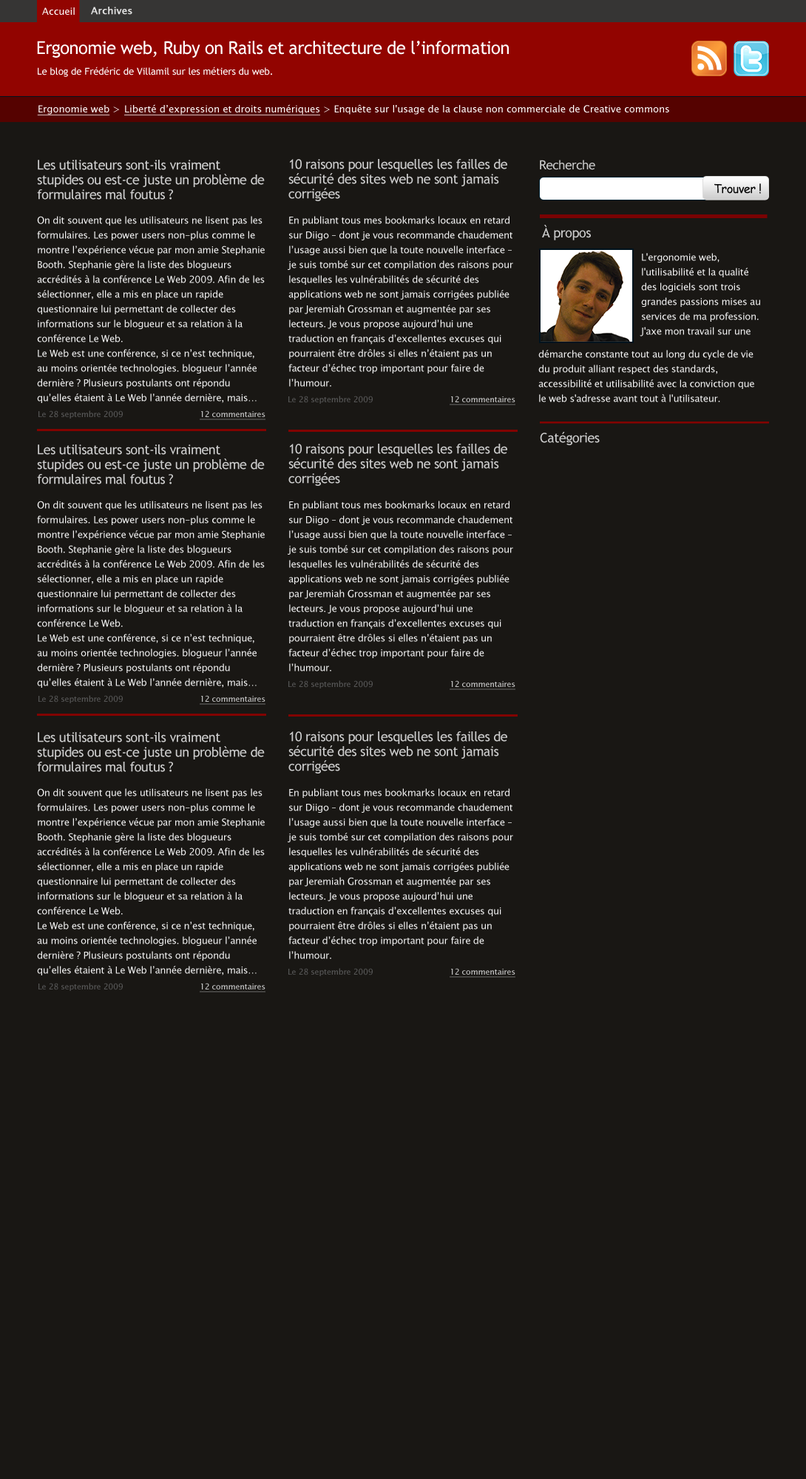
<style>
.page{position:relative;width:806px;height:1479px;background:#191714}
.page>*{position:absolute;margin:0}
.t1{font:9.6px "LucidaSansUnicode";color:#ffffff}
.t2{font:9.6px "LucidaSansUnicode";color:#e1e1e1;font-weight:bold}
.t3{font:17.8px "TrebuchetMS";letter-spacing:-0.025em;color:#ffffff}
.t4{font:9.6px "TrebuchetMS";color:#ffffff}
.t5{font:9.6px "LucidaSansUnicode";color:#ffffff;text-decoration:underline}
.t6{font:13.3px/14.8px "TrebuchetMS";letter-spacing:-0.025em;color:#cccccc}
.t7{font:12.6px "TrebuchetMS";letter-spacing:-0.025em;color:#cccccc}
.t8{font:11.8px "ComicSansMS";letter-spacing:-0.025em;color:#000000}
.t9{font:9.6px/14.8px "LucidaSansUnicode";letter-spacing:-0.025em;color:#f0f0f0}
.t10{font:13.3px "TrebuchetMS";letter-spacing:-0.025em;color:#cccccc}
.t11{font:8.1px "LucidaSansUnicode";letter-spacing:-0.025em;color:#555555}
.t12{font:8.1px "LucidaSansUnicode";letter-spacing:-0.025em;color:#c2c2c2;text-decoration:underline}
.t13{font:8.1px "LucidaSansUnicode";letter-spacing:-0.025em;color:#c3c2c2;text-decoration:underline}
</style>
<div class="page">
<p class="t1" style="left:42px;top:7px;width:33px;height:8px">Accueil</p>
<p class="t2" style="left:91px;top:7px;width:41px;height:8px">Archives</p>
<p class="t3" style="left:37px;top:41px;width:472px;height:17px">Ergonomie web, Ruby on Rails et architecture de l’information</p>
<p class="t4" style="left:38px;top:67px;width:234px;height:10px">Le blog de Frédéric de Villamil sur les métiers du web.</p>
<p class="t1" style="left:37px;top:104px;width:632px;height:11px"><span class="t5">Ergonomie web</span> &gt; <span class="t5">Liberté d’expression et droits numériques</span> &gt; Enquête sur l'usage de la clause non commerciale de Creative commons</p>
<p class="t6" style="left:37px;top:160px;width:228px;height:40px">Les utilisateurs sont-ils vraiment stupides ou est-ce juste un problème de formulaires mal foutus ?</p>
<p class="t6" style="left:288px;top:159px;width:219px;height:42px">10 raisons pour lesquelles les failles de sécurité des sites web ne sont jamais corrigées</p>
<p class="t7" style="left:540px;top:160px;width:55px;height:10px">Recherche</p>
<p class="t8" style="left:714px;top:183px;width:47px;height:11px">Trouver !</p>
<p class="t9" style="left:37px;top:216px;width:228px;height:187px">On dit souvent que les utilisateurs ne lisent pas les formulaires. Les power users non-plus comme le montre l’expérience vécue par mon amie Stephanie Booth. Stephanie gère la liste des blogueurs accrédités à la conférence Le Web 2009. Afin de les sélectionner, elle a mis en place un rapide questionnaire lui permettant de collecter des informations sur le blogueur et sa relation à la conférence Le Web.<br>Le Web est une conférence, si ce n’est technique, au moins orientée technologies. blogueur l’année dernière ? Plusieurs postulants ont répondu qu’elles étaient à Le Web l’année dernière, mais… qu’elles n’y étaient pas.</p>
<p class="t9" style="left:288px;top:216px;width:225px;height:171px">En publiant tous mes bookmarks locaux en retard sur Diigo – dont je vous recommande chaudement l’usage aussi bien que la toute nouvelle interface – je suis tombé sur cet compilation des raisons pour lesquelles les vulnérabilités de sécurité des applications web ne sont jamais corrigées publiée par Jeremiah Grossman et augmentée par ses lecteurs. Je vous propose aujourd’hui une traduction en français d’excellentes excuses qui pourraient être drôles si elles n’étaient pas un facteur d’échec trop important pour faire de l’humour.</p>
<p class="t10" style="left:542px;top:225px;width:49px;height:15px">À propos</p>
<p class="t9" style="left:640px;top:253px;width:120px;height:84px">L'ergonomie web, l'utilisabilité et la qualité des logiciels sont trois grandes passions mises au services de ma profession.<br>J'axe mon travail sur une</p>
<p class="t9" style="left:538px;top:350px;width:216px;height:52px">démarche constante tout au long du cycle de vie du produit alliant respect des standards, accessibilité et utilisabilité avec la conviction que le web s'adresse avant tout à l'utilisateur.</p>
<p class="t11" style="left:288px;top:396px;width:85px;height:8px">Le 28 septembre 2009</p>
<p class="t12" style="left:450px;top:396px;width:65px;height:9px">12 commentaires</p>
<p class="t11" style="left:38px;top:410px;width:85px;height:9px">Le 28 septembre 2009</p>
<p class="t12" style="left:200px;top:410px;width:66px;height:10px">12 commentaires</p>
<p class="t10" style="left:540px;top:432px;width:60px;height:13px">Catégories</p>
<p class="t6" style="left:37px;top:444px;width:228px;height:40px">Les utilisateurs sont-ils vraiment stupides ou est-ce juste un problème de formulaires mal foutus ?</p>
<p class="t6" style="left:288px;top:444px;width:219px;height:42px">10 raisons pour lesquelles les failles de sécurité des sites web ne sont jamais corrigées</p>
<p class="t9" style="left:37px;top:501px;width:228px;height:187px">On dit souvent que les utilisateurs ne lisent pas les formulaires. Les power users non-plus comme le montre l’expérience vécue par mon amie Stephanie Booth. Stephanie gère la liste des blogueurs accrédités à la conférence Le Web 2009. Afin de les sélectionner, elle a mis en place un rapide questionnaire lui permettant de collecter des informations sur le blogueur et sa relation à la conférence Le Web.<br>Le Web est une conférence, si ce n’est technique, au moins orientée technologies. blogueur l’année dernière ? Plusieurs postulants ont répondu qu’elles étaient à Le Web l’année dernière, mais… qu’elles n’y étaient pas.</p>
<p class="t9" style="left:288px;top:501px;width:225px;height:171px">En publiant tous mes bookmarks locaux en retard sur Diigo – dont je vous recommande chaudement l’usage aussi bien que la toute nouvelle interface – je suis tombé sur cet compilation des raisons pour lesquelles les vulnérabilités de sécurité des applications web ne sont jamais corrigées publiée par Jeremiah Grossman et augmentée par ses lecteurs. Je vous propose aujourd’hui une traduction en français d’excellentes excuses qui pourraient être drôles si elles n’étaient pas un facteur d’échec trop important pour faire de l’humour.</p>
<p class="t11" style="left:288px;top:680px;width:85px;height:9px">Le 28 septembre 2009</p>
<p class="t12" style="left:450px;top:680px;width:65px;height:10px">12 commentaires</p>
<p class="t11" style="left:38px;top:695px;width:85px;height:8px">Le 28 septembre 2009</p>
<p class="t13" style="left:200px;top:695px;width:66px;height:10px">12 commentaires</p>
<p class="t6" style="left:37px;top:732px;width:228px;height:40px">Les utilisateurs sont-ils vraiment stupides ou est-ce juste un problème de formulaires mal foutus ?</p>
<p class="t6" style="left:288px;top:731px;width:219px;height:43px">10 raisons pour lesquelles les failles de sécurité des sites web ne sont jamais corrigées</p>
<p class="t9" style="left:37px;top:788px;width:228px;height:188px">On dit souvent que les utilisateurs ne lisent pas les formulaires. Les power users non-plus comme le montre l’expérience vécue par mon amie Stephanie Booth. Stephanie gère la liste des blogueurs accrédités à la conférence Le Web 2009. Afin de les sélectionner, elle a mis en place un rapide questionnaire lui permettant de collecter des informations sur le blogueur et sa relation à la conférence Le Web.<br>Le Web est une conférence, si ce n’est technique, au moins orientée technologies. blogueur l’année dernière ? Plusieurs postulants ont répondu qu’elles étaient à Le Web l’année dernière, mais… qu’elles n’y étaient pas.</p>
<p class="t9" style="left:288px;top:788px;width:225px;height:171px">En publiant tous mes bookmarks locaux en retard sur Diigo – dont je vous recommande chaudement l’usage aussi bien que la toute nouvelle interface – je suis tombé sur cet compilation des raisons pour lesquelles les vulnérabilités de sécurité des applications web ne sont jamais corrigées publiée par Jeremiah Grossman et augmentée par ses lecteurs. Je vous propose aujourd’hui une traduction en français d’excellentes excuses qui pourraient être drôles si elles n’étaient pas un facteur d’échec trop important pour faire de l’humour.</p>
<p class="t11" style="left:288px;top:968px;width:85px;height:8px">Le 28 septembre 2009</p>
<p class="t12" style="left:450px;top:968px;width:65px;height:10px">12 commentaires</p>
<p class="t11" style="left:38px;top:983px;width:85px;height:8px">Le 28 septembre 2009</p>
<p class="t12" style="left:200px;top:983px;width:66px;height:10px">12 commentaires</p>
</div>
